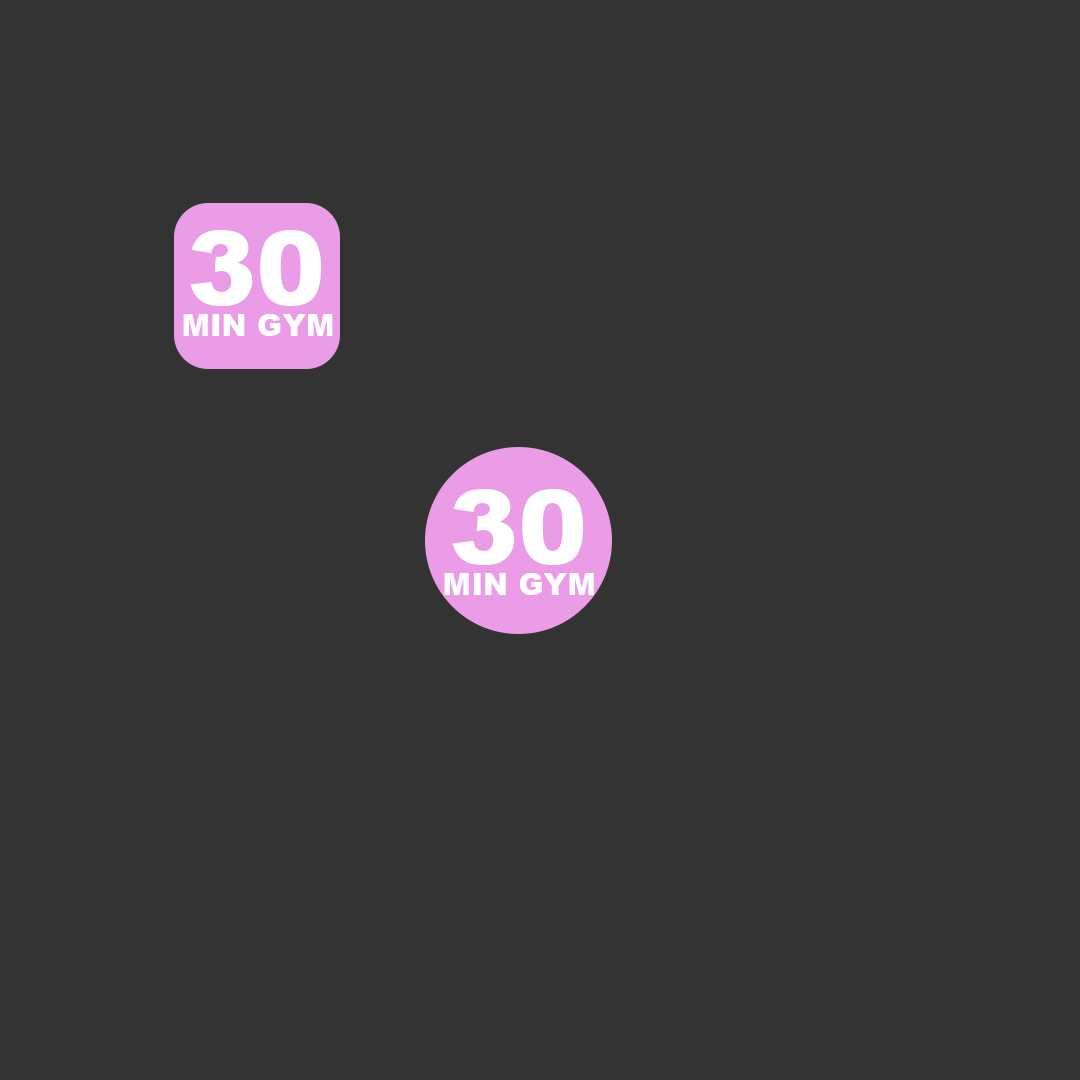
<style>
.page{position:relative;width:1080px;height:1080px;background:#333333}
.page>*{position:absolute;margin:0}
.t1{font:104px "Arial-Black";color:#ffffff}
.t2{font:30.3px "Arial-Black";color:#ffffff}
</style>
<div class="page">
<p class="t1" style="left:190px;top:230px;width:132px;height:76px">30</p>
<p class="t2" style="left:183px;top:314px;width:150px;height:22px">MIN GYM</p>
</div>
